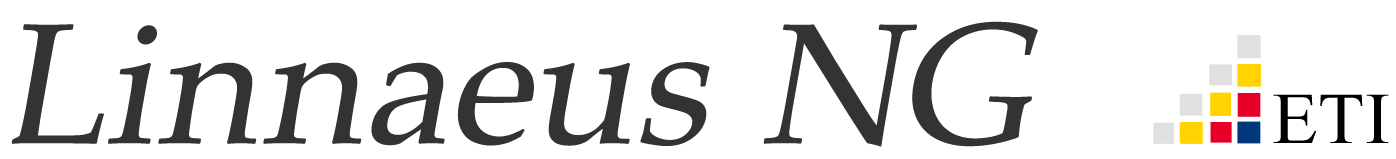
<style>
.page{position:relative;width:1396px;height:159px;background:#ffffff}
.page>*{position:absolute;margin:0}
.t1{font:172px "PalatinoLinotype-Roman";letter-spacing:0.025em;color:#333333;font-style:italic}
.t2{font:72.5px "TimesNewRomanPSMT";letter-spacing:0.025em;color:#000000;scale:1.04 1}
</style>
<div class="page">
<p class="t1" style="left:11px;top:21px;width:1027px;height:126px">Linnaeus NG</p>
<p class="t2" style="left:1273px;top:94px;width:116px;height:49px">ETI</p>
</div>
